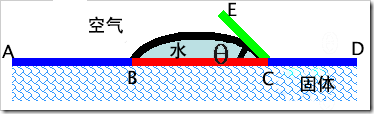
<style>
.page{position:relative;width:374px;height:114px;background:#ffffff}
.page>*{position:absolute;margin:0}
.t1{font:18px "LucidaSansUnicode";color:#000000}
</style>
<div class="page">
<p class="t1" style="left:228px;top:2px;width:9px;height:14px">E</p>
<p class="t1" style="left:352px;top:41px;width:12px;height:14px">D</p>
<p class="t1" style="left:2px;top:44px;width:13px;height:14px">A</p>
<p class="t1" style="left:128px;top:70px;width:9px;height:14px">B</p>
<p class="t1" style="left:262px;top:71px;width:12px;height:15px">C</p>
</div>
